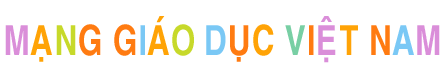
<style>
.page{position:relative;width:445px;height:73px;background:#ffffff}
.page>*{position:absolute;margin:0}
.t1{font:41.7px "VNI-Helve-Bold";color:#ff7b11;scale:0.76 1}
.t2{font:41.7px "VNI-Helve-Bold";color:#da8ed9;scale:0.76 1}
.t3{font:41.7px "VNI-Helve-Bold";color:#ffa306;scale:0.76 1}
.t4{font:41.7px "VNI-Helve-Bold";color:#c7d92a;scale:0.76 1}
.t5{font:41.7px "VNI-Helve-Bold";color:#7ac8f5;scale:0.76 1}
.t6{font:41.7px "VNI-Helve-Bold";color:#78cfa4;scale:0.76 1}
</style>
<div class="page">
<p class="t1" style="left:5px;top:16px;width:435px;height:47px"><span class="t2">M</span><span class="t3">AÏ</span><span class="t4">N</span>G G<span class="t5">I</span><span class="t3">AÙ</span><span class="t4">O </span><span class="t5">D</span>UÏ<span class="t3">C </span><span class="t6">V</span>I<span class="t2">EÄ</span><span class="t3">T</span> N<span class="t5">A</span><span class="t2">M</span></p>
</div>
